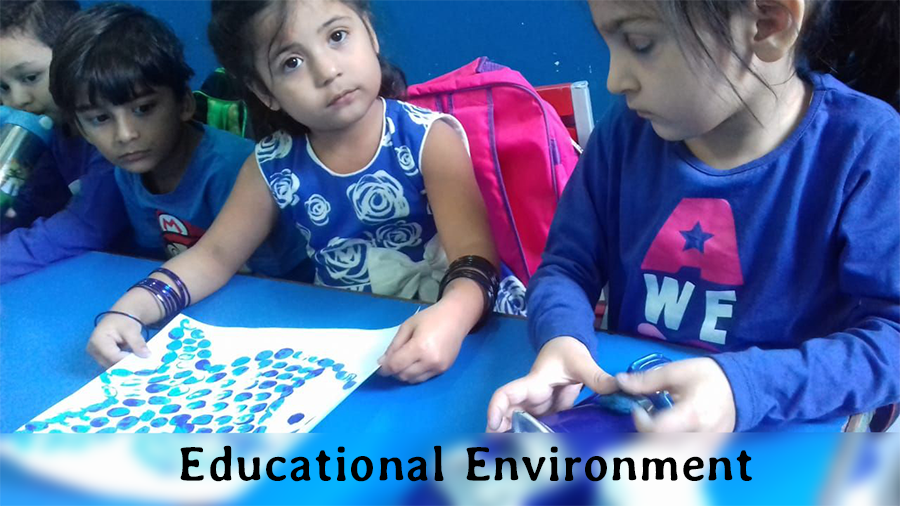
<style>
.page{position:relative;width:900px;height:506px}
.page>*{position:absolute;margin:0}
.t1{font:49.2px "Averia-Bold";letter-spacing:0.006em;color:#000000}
</style>
<div class="page">
<p class="t1" style="left:180px;top:445px;width:572px;height:37px">Educational Environment</p>
</div>
